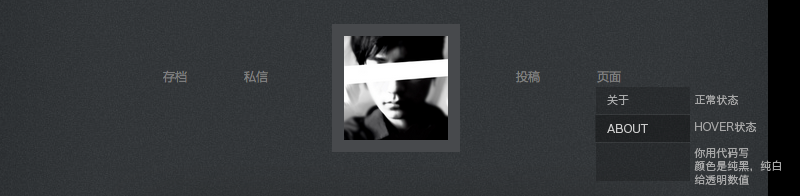
<style>
.page{position:relative;width:800px;height:196px}
.page>*{position:absolute;margin:0}
.t1{font:11px "HiraginoSansGB-W3";color:#aaabab;text-transform:uppercase}
.t2{font:11px "HiraginoSansGB-W3";color:#a6a6a6;text-transform:uppercase}
.t3{font:11px "HiraginoSansGB-W3";color:#cccccc;text-transform:uppercase}
</style>
<div class="page">
<p class="t1" style="left:607px;top:94px;width:22px;height:11px">关于</p>
<p class="t2" style="left:694px;top:94px;width:87px;height:91px">正常状态<br><br>hover状态<br><br>你用代码写<br>颜色是纯黑，纯白<br>给透明数值</p>
<p class="t3" style="left:607px;top:124px;width:41px;height:9px">about</p>
</div>
